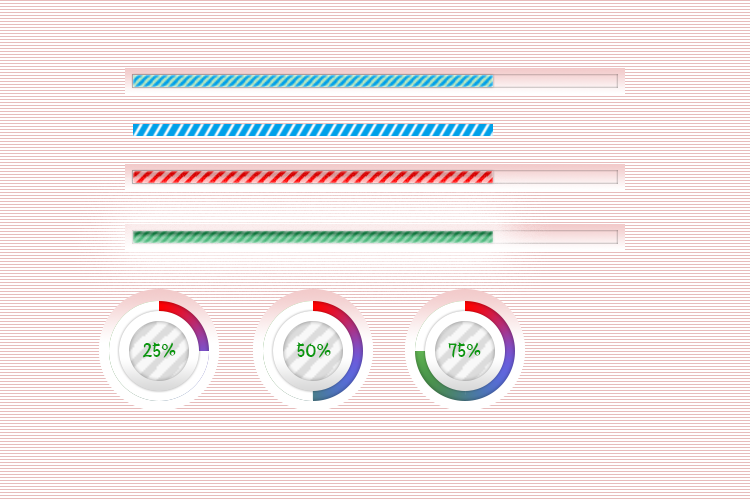
<style>
.page{position:relative;width:750px;height:500px;background:#ffffff}
.page>*{position:absolute;margin:0}
.t1{font:20px "YeonSung-Regular";color:#0b980f;font-variant:small-caps}
</style>
<div class="page">
<p class="t1" style="left:142px;top:342px;width:34px;height:16px">25%</p>
<p class="t1" style="left:296px;top:342px;width:35px;height:16px">50%</p>
<p class="t1" style="left:448px;top:342px;width:33px;height:16px">75%</p>
</div>
